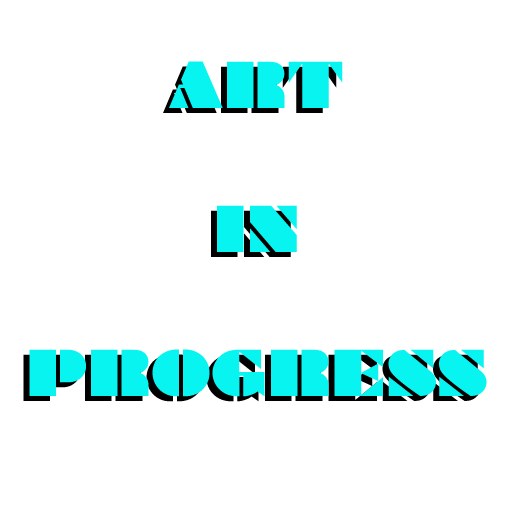
<style>
.page{position:relative;width:512px;height:512px;background:#ffffff}
.page>*{position:absolute;margin:0}
.t1{font:60px "Braggadocio";color:#07f4f1}
.t2{font:60px "Braggadocio"}
</style>
<div class="page">
<p class="t1" style="left:29px;top:61px;width:458px;height:336px;text-align:center">ART<br><br>IN<br><br>PROGRESS</p>
<p class="t2" style="left:23px;top:66px;width:458px;height:336px;text-align:center">ART<br><br>IN<br><br>PROGRESS</p>
</div>
